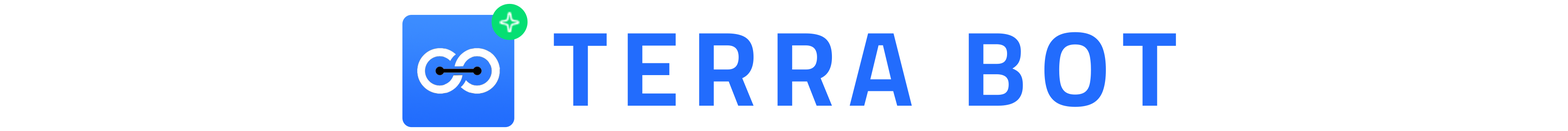
<style>
.page{position:relative;width:1568px;height:131px;background:#ffffff}
.page>*{position:absolute;margin:0}
.t1{font:105.5px "Cairo-Bold";letter-spacing:0.125em;color:#226cfd}
</style>
<div class="page">
<p class="t1" style="left:554px;top:32px;width:622px;height:75px">TERRA BOT</p>
</div>
